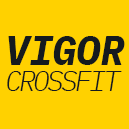
<style>
.page{position:relative;width:129px;height:129px;background:#ffd100}
.page>*{position:absolute;margin:0}
.t1{font:41.2px "IBMPlexMono-BoldItalic";letter-spacing:-0.025em;color:#151a1e;text-transform:uppercase}
.t2{font:28.1px "IBMPlexMono-LightItalic";letter-spacing:-0.1em;color:#151a1e;text-transform:uppercase}
</style>
<div class="page">
<p class="t1" style="left:8px;top:36px;width:117px;height:29px">vigor</p>
<p class="t2" style="left:7px;top:71px;width:115px;height:20px">crossfit</p>
</div>
